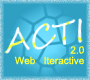
<style>
.page{position:relative;width:90px;height:80px;background:#2f9fc2}
.page>*{position:absolute;margin:0}
.t1{font:10px "DokChampa";color:#ffff33}
</style>
<div class="page">
<p class="t1" style="left:70px;top:46px;width:14px;height:8px">2.0</p>
<p class="t1" style="left:14px;top:56px;width:70px;height:9px">Web Iteractive</p>
</div>
